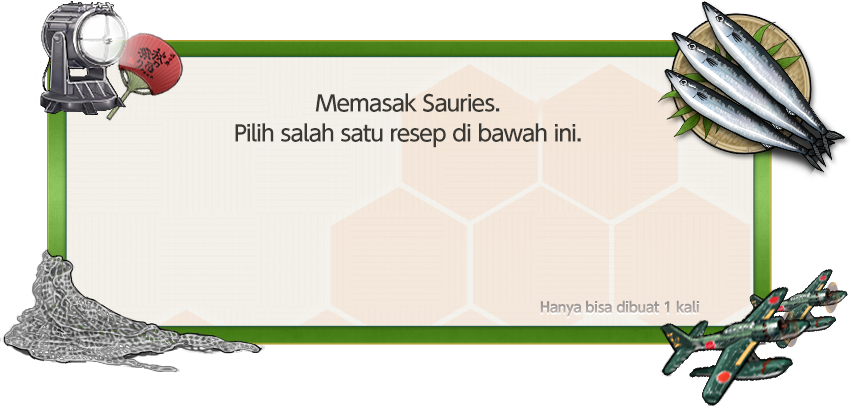
<style>
.page{position:relative;width:858px;height:406px;background:#ffffff}
.page>*{position:absolute;margin:0}
.t1{font:22px/30px "UDShinGoPro-Medium";letter-spacing:-0.04em;color:#3b3935}
.t2{font:14px "UDShinGoPro-Bold";letter-spacing:-0.04em;color:#a9a19d}
</style>
<div class="page">
<p class="t1" style="left:235px;top:93px;width:346px;height:55px;text-align:center">Memasak Sauries.<br>Pilih salah satu resep di bawah ini.</p>
<p class="t2" style="left:540px;top:300px;width:159px;height:17px">Hanya bisa dibuat 1 kali</p>
</div>
